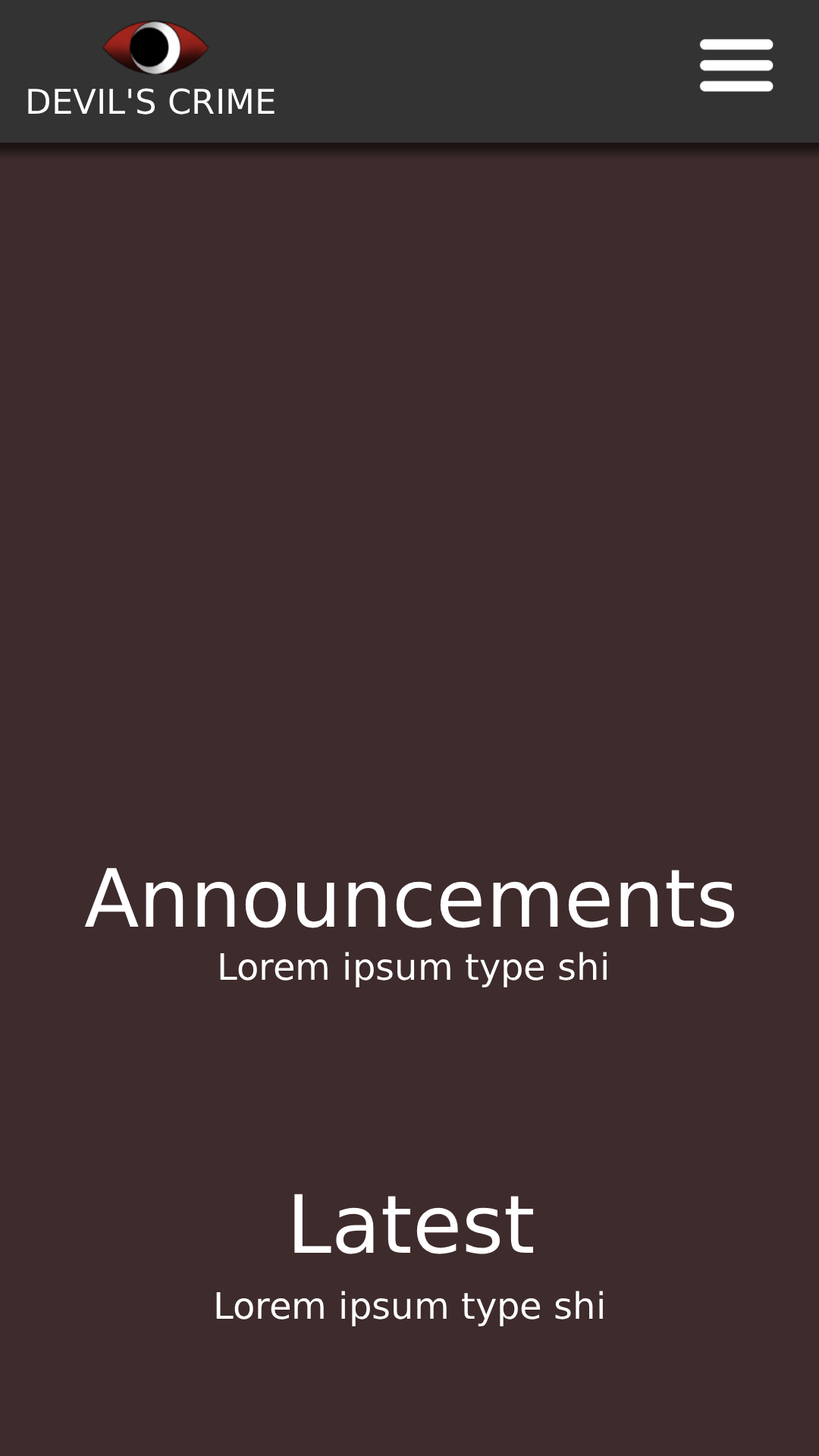
<style>
.page{position:relative;width:819px;height:1456px;background:#3e2b2b}
.page>*{position:absolute;margin:0}
.t1{font:34.2px "DejaVuSans";color:#ffffff}
.t2{font:80.4px "DejaVuSans";color:#ffffff}
.t3{font:36.4px "DejaVuSans";color:#ffffff}
</style>
<div class="page">
<p class="t1" style="left:28px;top:88px;width:247px;height:27px">DEVIL'S CRIME</p>
<p class="t2" style="left:84px;top:868px;width:651px;height:60px">Announcements</p>
<p class="t3" style="left:220px;top:952px;width:387px;height:35px">Lorem ipsum type shi</p>
<p class="t2" style="left:294px;top:1194px;width:240px;height:60px">Latest</p>
<p class="t3" style="left:216px;top:1291px;width:387px;height:35px">Lorem ipsum type shi</p>
</div>
